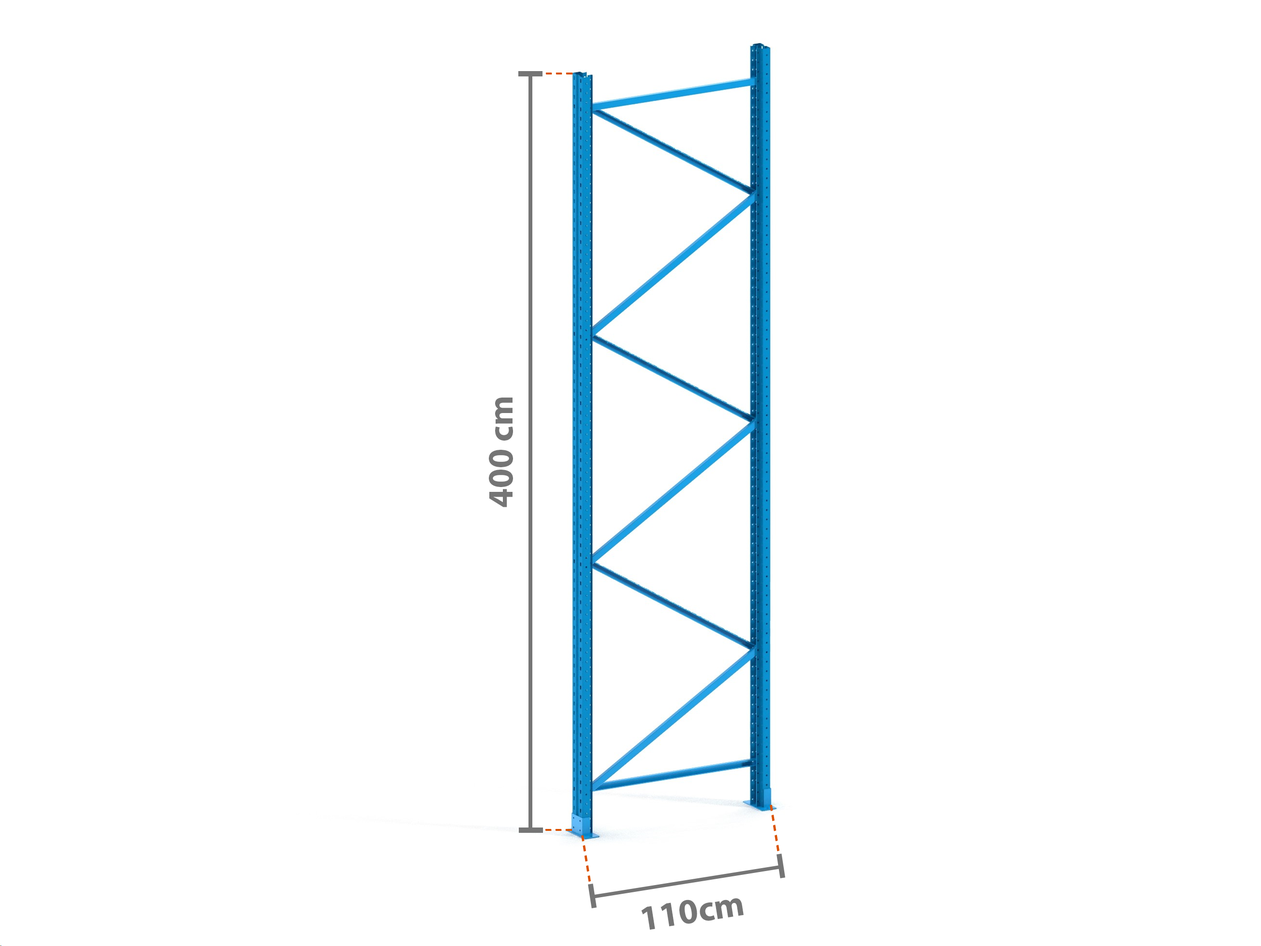
<style>
.page{position:relative;width:1261px;height:946px;background:#ffffff}
.page>*{position:absolute;margin:0}
.t1{font:35.5px "MyriadPro-Bold";color:#757575}
</style>
<div class="page">
<p class="t1" style="left:489px;top:397px;width:24px;height:110px;rotate:-90deg">400 cm</p>
<p class="t1" style="left:641px;top:898px;width:103px;height:32px;rotate:-9deg">110cm</p>
</div>
